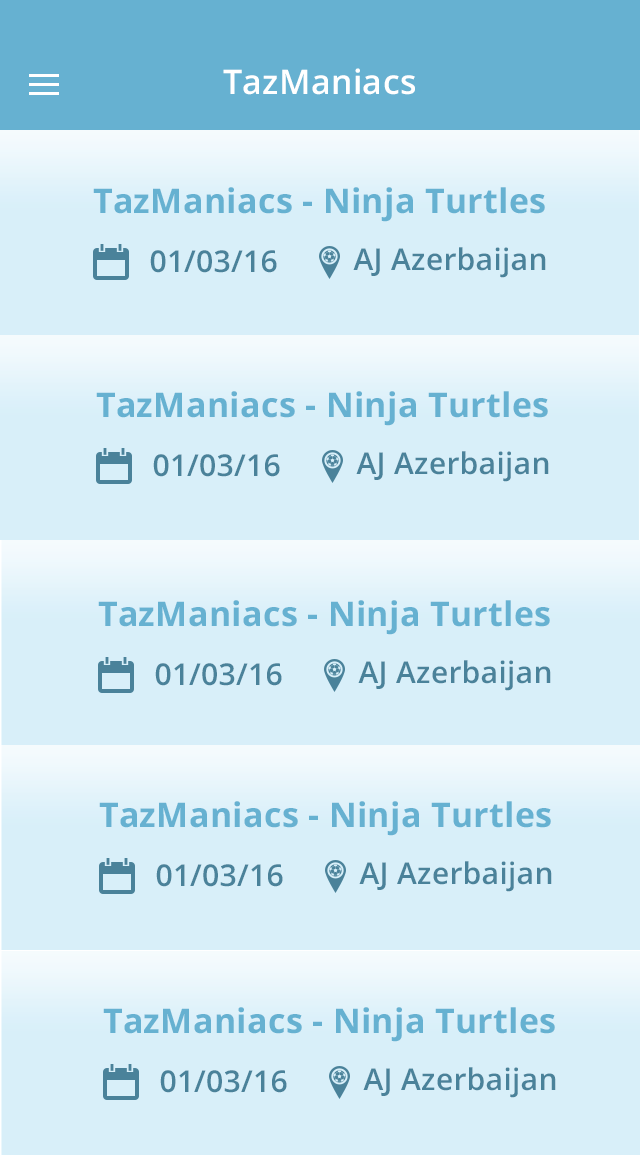
<style>
.page{position:relative;width:640px;height:1155px;background:#d8eff9}
.page>*{position:absolute;margin:0}
.t1{font:34px "OpenSans-Semibold";letter-spacing:0.01em;color:#ffffff}
.t2{font:34px "OpenSans-Bold";letter-spacing:0.01em;color:#66b1d1}
.t3{font:30px "OpenSans-Semibold";letter-spacing:0.01em;color:#4a829a}
</style>
<div class="page">
<p class="t1" style="left:223px;top:68px;width:192px;height:27px">TazManiacs</p>
<p class="t2" style="left:93px;top:187px;width:452px;height:35px">TazManiacs - Ninja Turtles</p>
<p class="t3" style="left:150px;top:250px;width:127px;height:23px">01/03/16</p>
<p class="t3" style="left:353px;top:247px;width:193px;height:31px">AJ Azerbaijan</p>
<p class="t2" style="left:96px;top:391px;width:452px;height:35px">TazManiacs - Ninja Turtles</p>
<p class="t3" style="left:153px;top:454px;width:127px;height:23px">01/03/16</p>
<p class="t3" style="left:356px;top:451px;width:193px;height:31px">AJ Azerbaijan</p>
<p class="t2" style="left:98px;top:600px;width:452px;height:35px">TazManiacs - Ninja Turtles</p>
<p class="t3" style="left:155px;top:663px;width:127px;height:23px">01/03/16</p>
<p class="t3" style="left:358px;top:660px;width:193px;height:31px">AJ Azerbaijan</p>
<p class="t2" style="left:99px;top:801px;width:452px;height:35px">TazManiacs - Ninja Turtles</p>
<p class="t3" style="left:156px;top:864px;width:127px;height:23px">01/03/16</p>
<p class="t3" style="left:359px;top:861px;width:193px;height:31px">AJ Azerbaijan</p>
<p class="t2" style="left:103px;top:1007px;width:452px;height:35px">TazManiacs - Ninja Turtles</p>
<p class="t3" style="left:160px;top:1070px;width:127px;height:23px">01/03/16</p>
<p class="t3" style="left:363px;top:1067px;width:193px;height:31px">AJ Azerbaijan</p>
</div>
